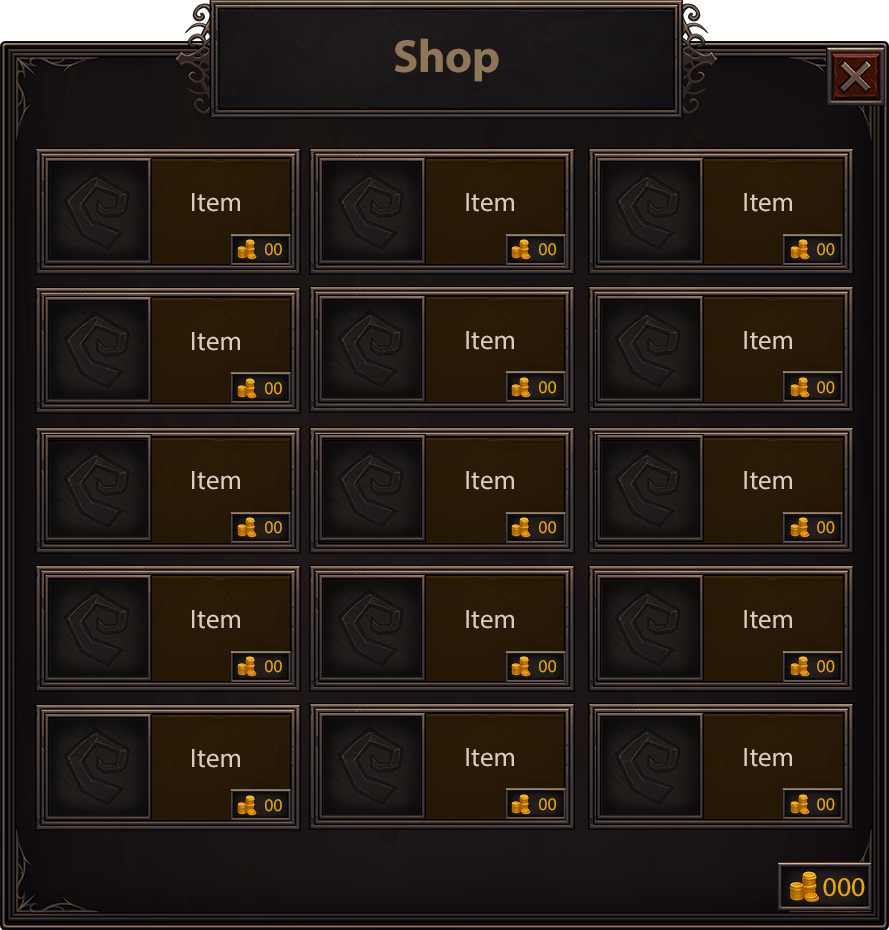
<style>
.page{position:relative;width:889px;height:930px}
.page>*{position:absolute;margin:0}
.t1{font:46.9px "MyriadPro-Bold";color:#907659}
.t2{font:26.8px "MyriadPro-Regular";color:#dbcdbe}
.t3{font:17.6px "MyriadPro-Regular";color:#eba800}
.t4{font:27.4px "MyriadPro-Regular";color:#eba800}
</style>
<div class="page">
<p class="t1" style="left:394px;top:38px;width:105px;height:44px">Shop</p>
<p class="t2" style="left:192px;top:193px;width:48px;height:19px">Item</p>
<p class="t2" style="left:466px;top:193px;width:48px;height:19px">Item</p>
<p class="t2" style="left:744px;top:193px;width:48px;height:19px">Item</p>
<p class="t3" style="left:265px;top:243px;width:17px;height:13px">00</p>
<p class="t3" style="left:539px;top:243px;width:17px;height:13px">00</p>
<p class="t3" style="left:817px;top:243px;width:18px;height:13px">00</p>
<p class="t2" style="left:192px;top:332px;width:48px;height:19px">Item</p>
<p class="t2" style="left:466px;top:331px;width:48px;height:19px">Item</p>
<p class="t2" style="left:744px;top:331px;width:48px;height:19px">Item</p>
<p class="t3" style="left:265px;top:382px;width:17px;height:13px">00</p>
<p class="t3" style="left:539px;top:381px;width:17px;height:13px">00</p>
<p class="t3" style="left:817px;top:381px;width:18px;height:13px">00</p>
<p class="t2" style="left:192px;top:471px;width:48px;height:19px">Item</p>
<p class="t2" style="left:466px;top:471px;width:48px;height:19px">Item</p>
<p class="t2" style="left:744px;top:471px;width:48px;height:19px">Item</p>
<p class="t3" style="left:265px;top:521px;width:17px;height:13px">00</p>
<p class="t3" style="left:539px;top:521px;width:17px;height:13px">00</p>
<p class="t3" style="left:817px;top:521px;width:18px;height:13px">00</p>
<p class="t2" style="left:192px;top:610px;width:48px;height:19px">Item</p>
<p class="t2" style="left:466px;top:610px;width:48px;height:19px">Item</p>
<p class="t2" style="left:744px;top:610px;width:48px;height:19px">Item</p>
<p class="t3" style="left:265px;top:660px;width:17px;height:13px">00</p>
<p class="t3" style="left:539px;top:660px;width:17px;height:13px">00</p>
<p class="t3" style="left:817px;top:660px;width:18px;height:13px">00</p>
<p class="t2" style="left:192px;top:749px;width:48px;height:19px">Item</p>
<p class="t2" style="left:466px;top:748px;width:48px;height:19px">Item</p>
<p class="t2" style="left:744px;top:748px;width:48px;height:19px">Item</p>
<p class="t3" style="left:539px;top:798px;width:17px;height:13px">00</p>
<p class="t3" style="left:817px;top:798px;width:18px;height:13px">00</p>
<p class="t3" style="left:265px;top:799px;width:17px;height:13px">00</p>
<p class="t4" style="left:823px;top:878px;width:42px;height:19px">000</p>
</div>
